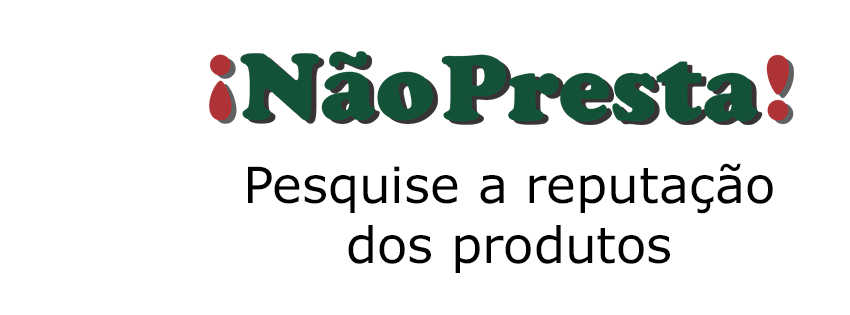
<style>
.page{position:relative;width:850px;height:315px;background:#ffffff}
.page>*{position:absolute;margin:0}
.t1{font:50px "Verdana";color:#000000}
</style>
<div class="page">
<p class="t1" style="left:248px;top:163px;width:525px;height:110px;text-align:center">Pesquise a reputação<br>dos produtos</p>
</div>
